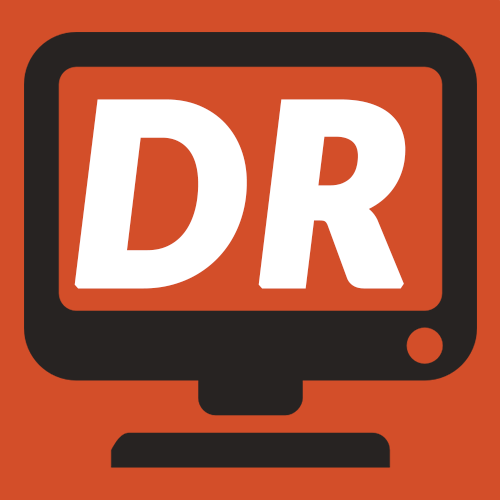
<style>
.page{position:relative;width:500px;height:500px;background:#d34e29}
.page>*{position:absolute;margin:0}
.t1{font:250px "Lato-BlackItalic";color:#ffffff;font-weight:bold}
</style>
<div class="page">
<p class="t1" style="left:74px;top:99px;width:332px;height:190px">DR</p>
</div>
